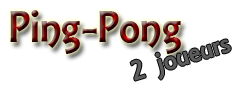
<style>
.page{position:relative;width:235px;height:88px;background:#ffffff}
.page>*{position:absolute;margin:0}
.t1{font:48px "ARESSENCE"}
.t2{font:30px "ARESSENCE";color:#5d5d5d}
</style>
<div class="page">
<p class="t1" style="left:10px;top:10px;width:171px;height:44px">Ping-Pong</p>
<p class="t2" style="left:130px;top:39px;width:101px;height:42px;rotate:-17deg">2 joueurs</p>
</div>
